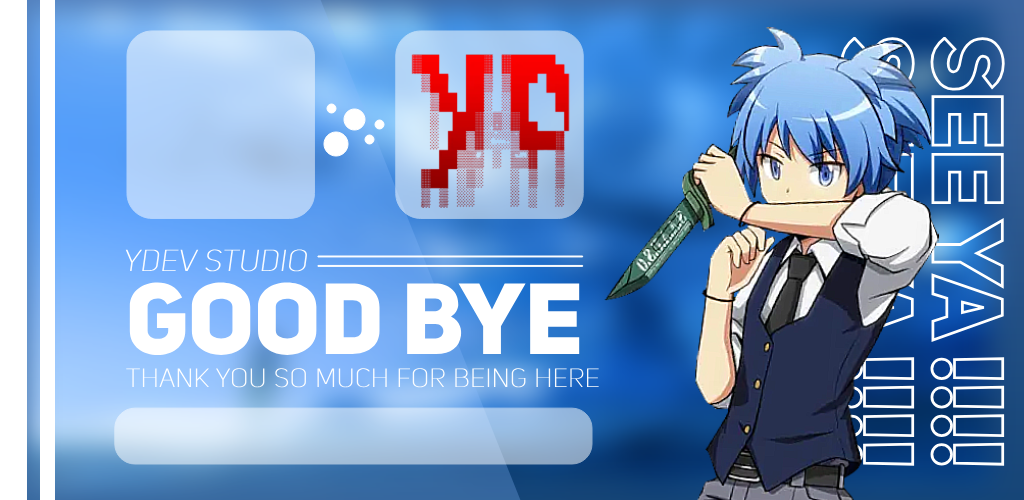
<style>
.page{position:relative;width:1024px;height:500px}
.page>*{position:absolute;margin:0}
.t1{font:98px "UniSansHeavyCAPS";color:#ffffff}
.t2{font:30px "UniSansThinItalicCAPS";color:#ffffff;font-weight:bold}
.t3{font:99.4px "UniSansHeavyCAPS";color:#ffffff}
.t4{font:26px "UniSansThinCAPS";color:#ffffff;font-weight:bold}
</style>
<div class="page">
<p class="t1" style="left:930px;top:37px;width:75px;height:429px;rotate:90deg">SEE YA !!!!</p>
<p class="t2" style="left:125px;top:249px;width:182px;height:23px">YDEV STUDIO</p>
<p class="t3" style="left:129px;top:282px;width:451px;height:73px">GOOD BYE</p>
<p class="t4" style="left:126px;top:368px;width:473px;height:20px">THANK YOU SO MUCH FOR BEING HERE</p>
</div>
